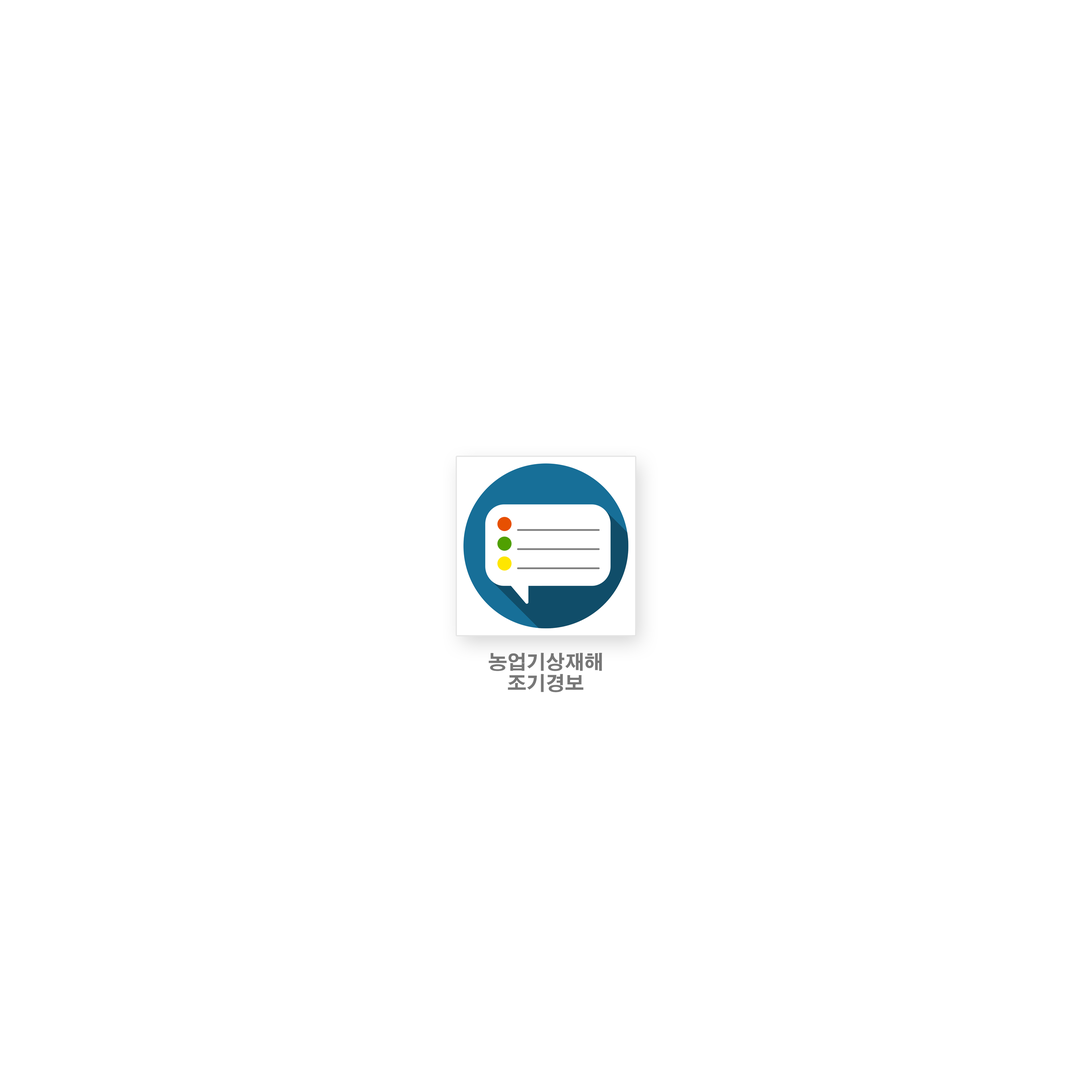
<style>
.page{position:relative;width:1092px;height:1092px;background:#ffffff}
.page>*{position:absolute;margin:0}
.t1{font:19.2px/21.2px "AdobeGothicStd-Bold";color:#777777}
</style>
<div class="page">
<p class="t1" style="left:488px;top:653px;width:114px;height:39px;text-align:center">농업기상재해<br>조기경보</p>
</div>
